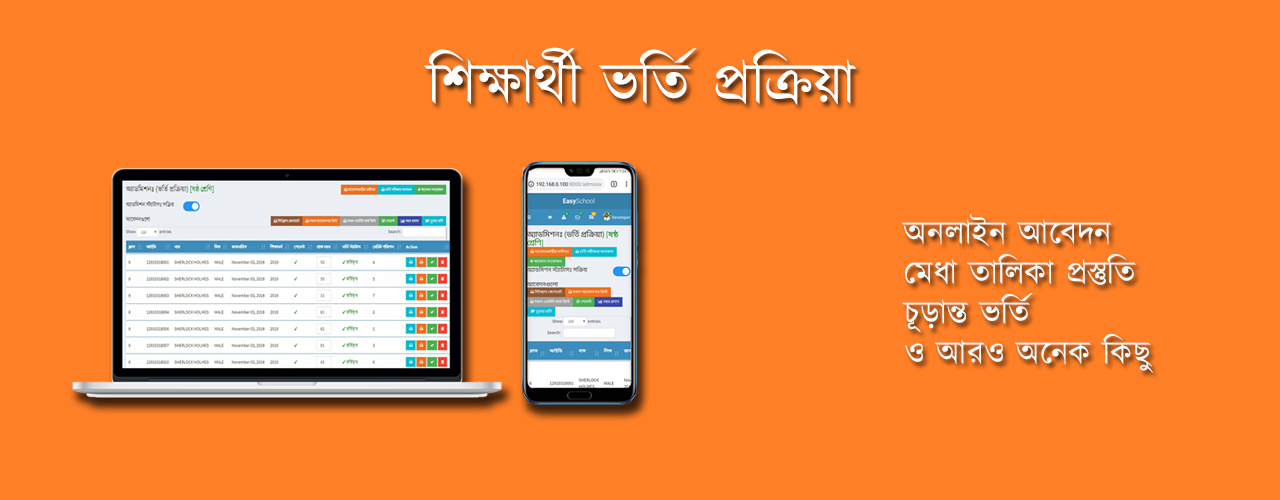
<style>
.page{position:relative;width:1280px;height:500px;background:#ff7f26}
.page>*{position:absolute;margin:0}
.t1{font:60px "Kalpurush";color:#ffffff}
.t2{font:33.3px "Kalpurush";color:#ffffff}
</style>
<div class="page">
<p class="t1" style="left:423px;top:47px;width:434px;height:58px">শিক্ষার্থী ভর্তি প্রক্রিয়া</p>
<p class="t2" style="left:901px;top:213px;width:252px;height:160px;text-align:right">অনলাইন আবেদন<br>মেধা তালিকা প্রস্তুতি<br>চূড়ান্ত ভর্তি<br>ও আরও অনেক কিছু</p>
</div>
